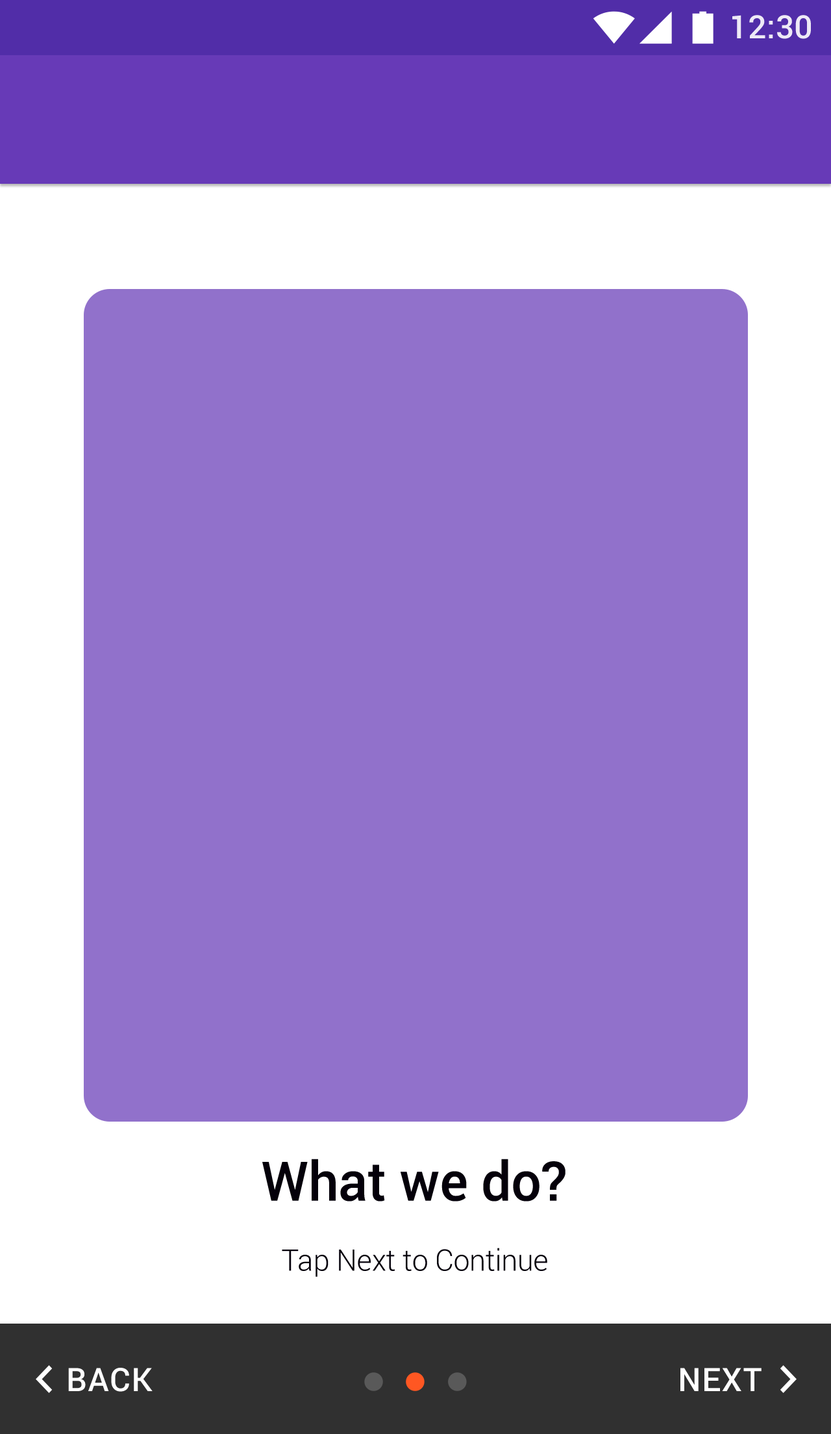
<style>
.page{position:relative;width:831px;height:1434px;background:#9171cb}
.page>*{position:absolute;margin:0}
.t1{font:32.2px "Roboto-Medium";color:#eeeaf6}
.t2{font:54.4px "Roboto-Medium";color:#04000a}
.t3{font:29.7px "Roboto-Light";color:#04000a}
.t4{font:32.4px "Roboto-Medium";letter-spacing:0.03em;color:#ffffff}
</style>
<div class="page">
<p class="t1" style="left:733px;top:15px;width:78px;height:24px">12:30</p>
<p class="t2" style="left:262px;top:1159px;width:304px;height:43px">What we do?</p>
<p class="t3" style="left:282px;top:1248px;width:266px;height:29px">Tap Next to Continue</p>
<p class="t4" style="left:68px;top:1368px;width:85px;height:24px">BACK</p>
<p class="t4" style="left:681px;top:1368px;width:81px;height:23px">NEXT</p>
</div>
